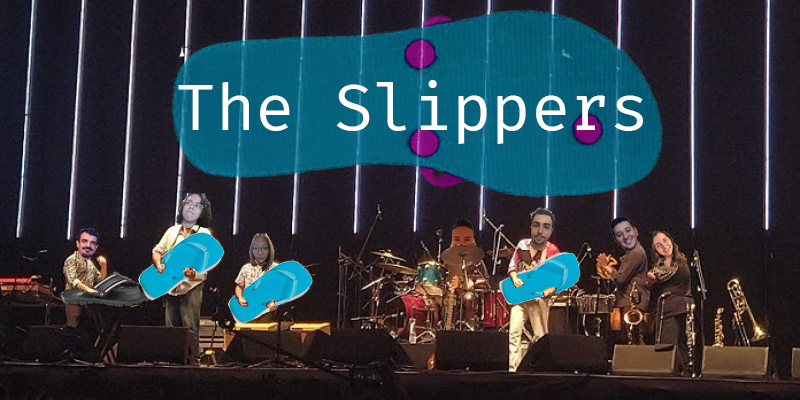
<style>
.page{position:relative;width:800px;height:400px}
.page>*{position:absolute;margin:0}
.t1{font:64px "FiraCode-Regular";color:#ffffff}
</style>
<div class="page">
<p class="t1" style="left:178px;top:80px;width:465px;height:64px">The Slippers</p>
</div>
